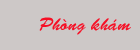
<style>
.page{position:relative;width:140px;height:50px;background:#cdc8c7}
.page>*{position:absolute;margin:0}
.t1{font:18px "VNI-Brush-Italic";color:#f60f25}
</style>
<div class="page">
<p class="t1" style="left:39px;top:17px;width:92px;height:18px">Phoøng khaùm</p>
</div>
